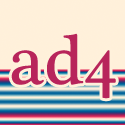
<style>
.page{position:relative;width:125px;height:125px;background:#fff0da}
.page>*{position:absolute;margin:0}
.t1{font:72px "PlantagenetCherokee";color:#b8255b}
</style>
<div class="page">
<p class="t1" style="left:11px;top:33px;width:105px;height:66px">ad4</p>
</div>
